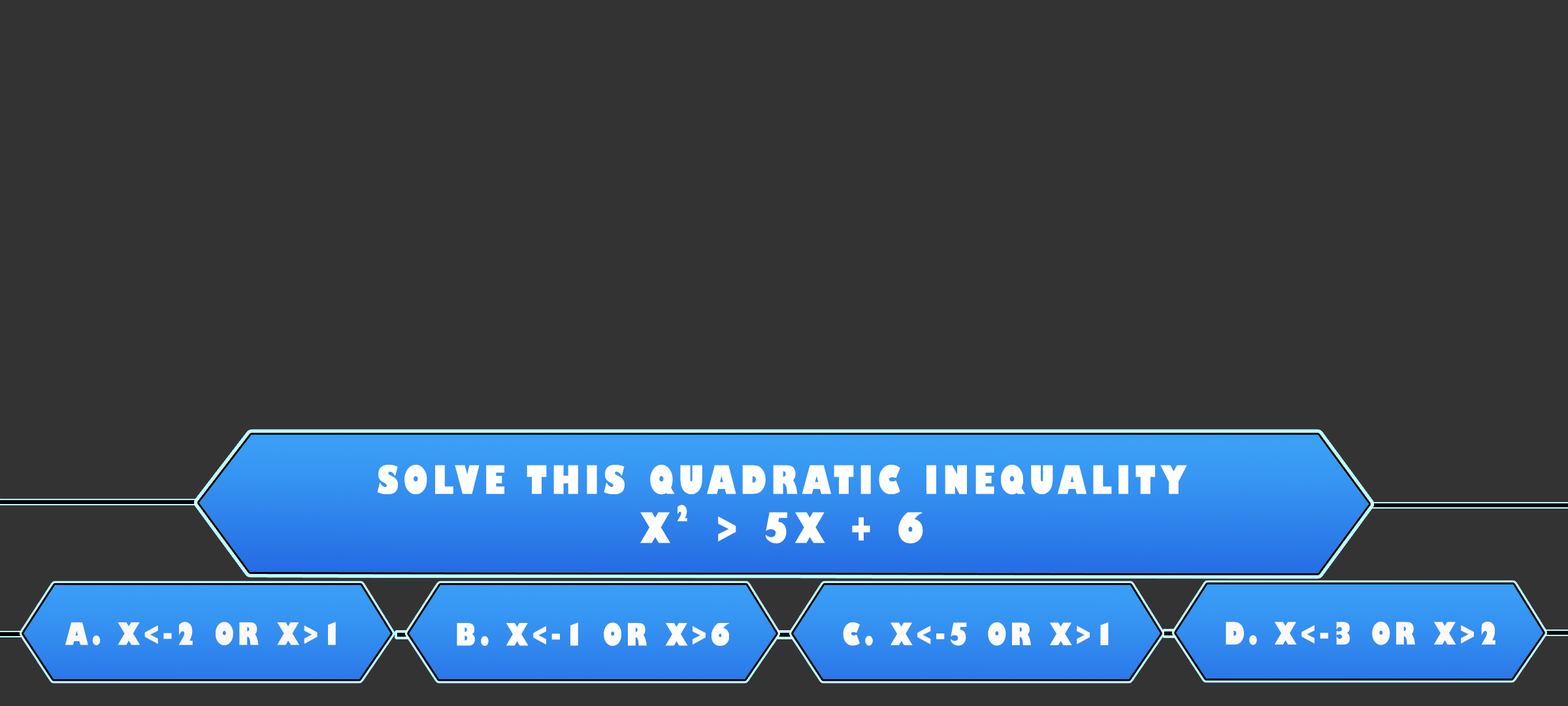
<style>
.page{position:relative;width:1568px;height:706px;background:#333333}
.page>*{position:absolute;margin:0}
.t1{font:38.1px/49px "GillSans-UltraBoldCondensed";letter-spacing:0.115em;color:#ffffff;text-transform:uppercase;scale:1.12 1}
.t2{font:40.8px/49px "GillSans-UltraBoldCondensed";letter-spacing:0.115em;color:#ffffff;text-transform:uppercase;scale:1.12 1}
.t3{font:21.1px "GillSans-UltraBoldCondensed";letter-spacing:0.115em;color:#ffffff;text-transform:uppercase;scale:1.11 1}
.t4{font:29.9px "GillSans-UltraBoldCondensed";letter-spacing:0.115em;color:#faf8f8;text-transform:uppercase;scale:1.12 1}
.t5{font:29.9px "GillSans-UltraBoldCondensed";letter-spacing:0.115em;color:#fdfdfd;text-transform:uppercase;scale:1.12 1}
.t6{font:29.9px "GillSans-UltraBoldCondensed";letter-spacing:0.115em;color:#fbfbfb;text-transform:uppercase;scale:1.12 1}
.t7{font:29.9px "GillSans-UltraBoldCondensed";letter-spacing:0.115em;color:#fdf9f9;text-transform:uppercase;scale:1.12 1}
</style>
<div class="page">
<p class="t1" style="left:377px;top:465px;width:810px;height:79px;text-align:center">solve this quadratic inequality<br><span class="t2">x  &gt; 5x + 6</span></p>
<p class="t3" style="left:677px;top:504px;width:10px;height:17px">2</p>
<p class="t4" style="left:65px;top:621px;width:271px;height:24px">a. x&lt;-2 or x&gt;1</p>
<p class="t5" style="left:457px;top:622px;width:272px;height:23px">b. x&lt;-1 or x&gt;6</p>
<p class="t6" style="left:843px;top:622px;width:266px;height:23px">c. x&lt;-5 or x&gt;1</p>
<p class="t7" style="left:1226px;top:621px;width:269px;height:24px">d. x&lt;-3 or x&gt;2</p>
</div>
